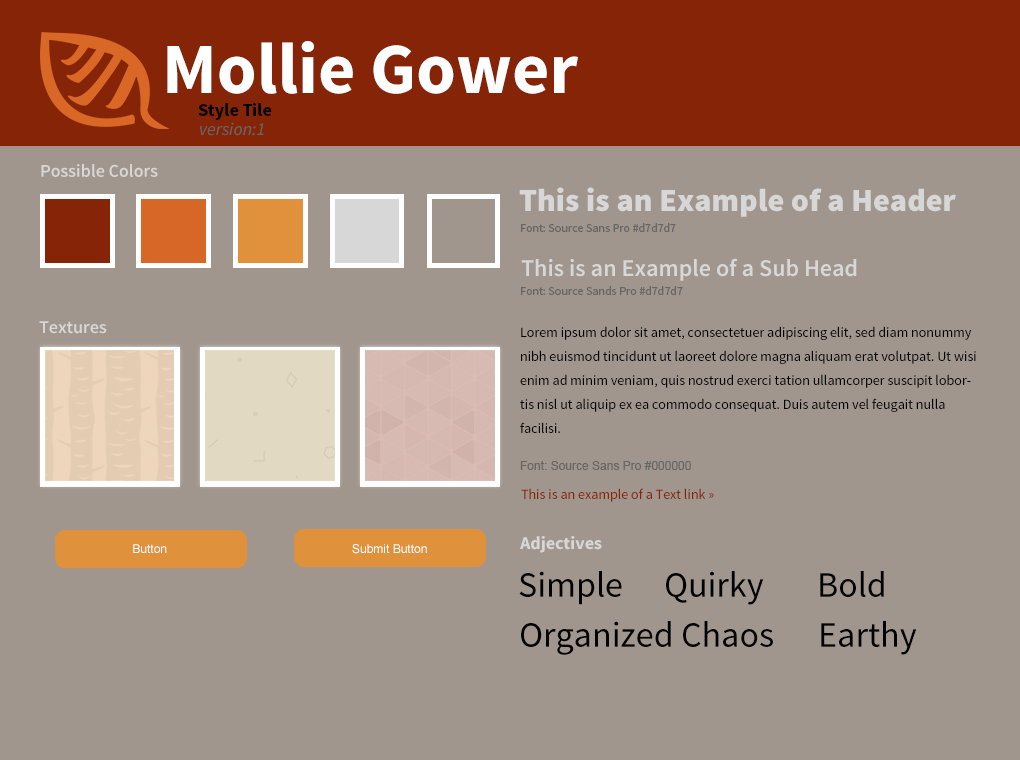
<style>
.page{position:relative;width:1020px;height:760px;background:#a0968d}
.page>*{position:absolute;margin:0}
.t1{font:72px "SourceSansPro-Bold";color:#ffffff}
.t2{font:18px "SourceSansPro-Bold";color:#000000}
.t3{font:18px "SourceSansPro-It";color:#666666}
.t4{font:18px "SourceSansPro-Semibold";color:#d7d7d7}
.t5{font:32px "SourceSansPro-Black";color:#d7d7d7}
.t6{font:12px "SourceSansPro-Regular";color:#666666}
.t7{font:24px "SourceSansPro-Semibold";color:#d7d7d7}
.t8{font:14px/24px "SourceSansPro-Regular";color:#000000}
.t9{font:12px "ArialMT";color:#666666}
.t10{font:14px "SourceSansPro-Regular";color:#852407}
.t11{font:12px "ArialMT";color:#ffffff}
.t12{font:18px "SourceSansPro-Bold";color:#d7d7d7}
.t13{font:36px "SourceSansPro-Regular";color:#000000}
</style>
<div class="page">
<p class="t1" style="left:167px;top:41px;width:411px;height:53px">Mollie Gower</p>
<p class="t2" style="left:198px;top:103px;width:74px;height:17px">Style Tile</p>
<p class="t3" style="left:200px;top:122px;width:64px;height:14px">version:1</p>
<p class="t4" style="left:41px;top:164px;width:117px;height:13px">Possible Colors</p>
<p class="t5" style="left:519px;top:187px;width:437px;height:30px">This is an Example of a Header</p>
<p class="t6" style="left:521px;top:223px;width:155px;height:9px">Font: Source Sans Pro #d7d7d7</p>
<p class="t7" style="left:521px;top:258px;width:336px;height:23px">This is an Example of a Sub Head</p>
<p class="t6" style="left:521px;top:286px;width:162px;height:9px">Font: Source Sands Pro #d7d7d7</p>
<p class="t4" style="left:39px;top:321px;width:68px;height:13px">Textures</p>
<p class="t8" style="left:520px;top:326px;width:456px;height:107px">Lorem ipsum dolor sit amet, consectetuer adipiscing elit, sed diam nonummy nibh euismod tincidunt ut laoreet dolore magna aliquam erat volutpat. Ut wisi enim ad minim veniam, quis nostrud exerci tation ullamcorper suscipit lobortis nisl ut aliquip ex ea commodo consequat. Duis autem vel feugait nulla facilisi.</p>
<p class="t9" style="left:520px;top:461px;width:171px;height:9px">Font: Source Sans Pro #000000</p>
<p class="t10" style="left:521px;top:488px;width:193px;height:14px">This is an example of a Text link »</p>
<p class="t11" style="left:133px;top:544px;width:34px;height:9px">Button</p>
<p class="t11" style="left:352px;top:544px;width:75px;height:10px">Submit Button</p>
<p class="t12" style="left:520px;top:536px;width:82px;height:17px">Adjectives</p>
<p class="t13" style="left:519px;top:571px;width:103px;height:34px">Simple</p>
<p class="t13" style="left:666px;top:571px;width:98px;height:34px">Quirky</p>
<p class="t13" style="left:820px;top:571px;width:64px;height:26px">Bold</p>
<p class="t13" style="left:521px;top:621px;width:252px;height:34px">Organized Chaos</p>
<p class="t13" style="left:821px;top:621px;width:96px;height:34px">Earthy</p>
</div>
